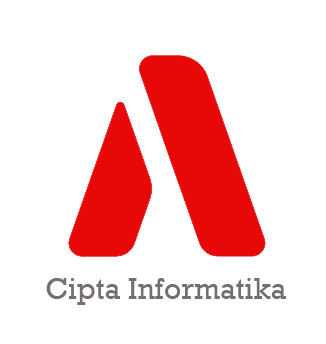
<style>
.page{position:relative;width:326px;height:344px;background:#ffffff}
.page>*{position:absolute;margin:0}
.t1{font:30px "Rockwell";color:#756f6f}
</style>
<div class="page">
<p class="t1" style="left:46px;top:278px;width:240px;height:27px">Cipta Informatika</p>
</div>
